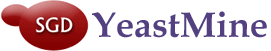
<style>
.page{position:relative;width:271px;height:51px;background:#ffffff}
.page>*{position:absolute;margin:0}
.t1{font:36px "BookAntiqua-Bold";color:#524081}
</style>
<div class="page">
<p class="t1" style="left:92px;top:11px;width:175px;height:27px">YeastMine</p>
</div>
